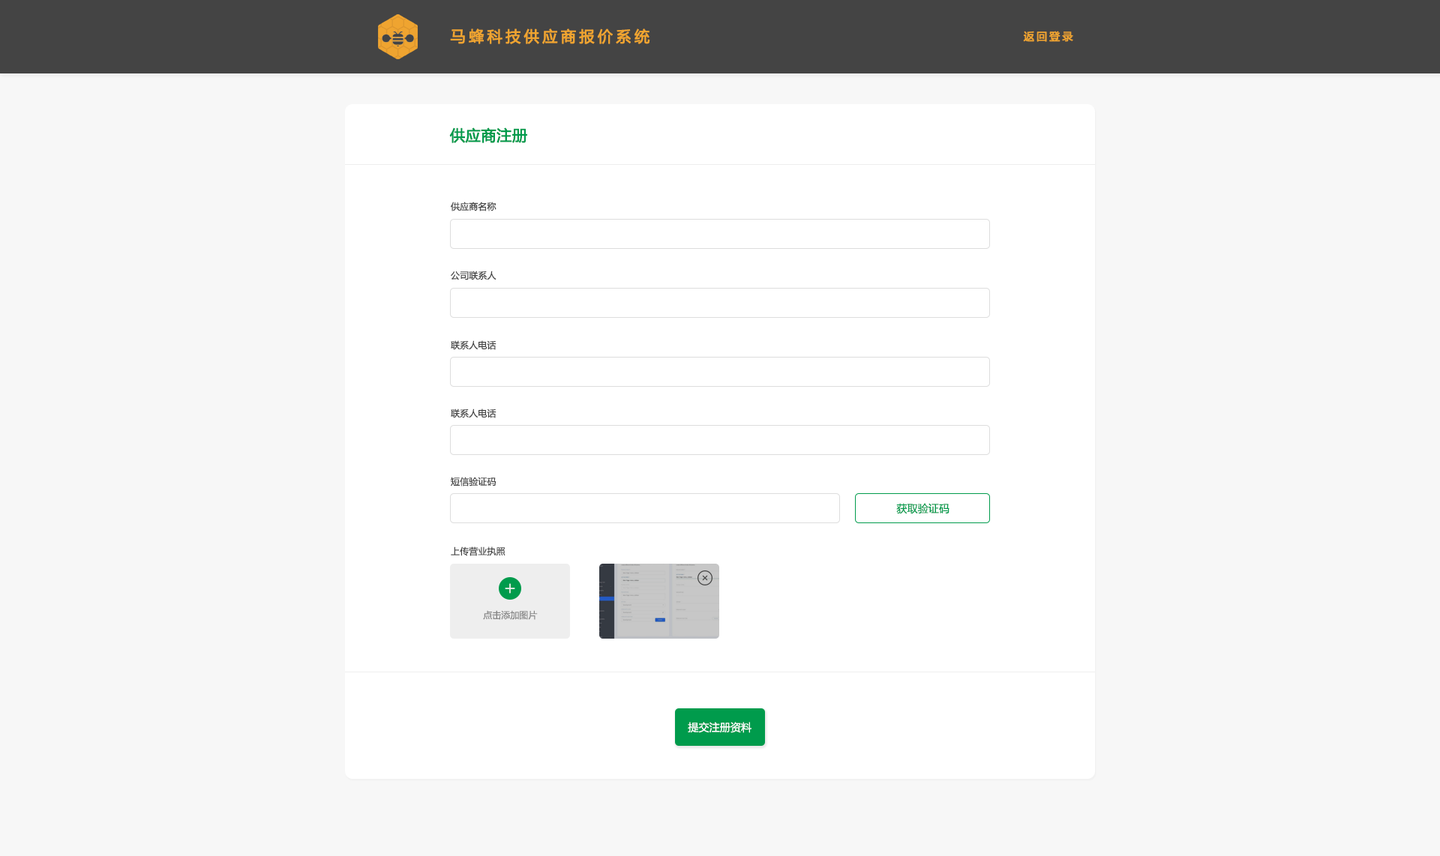
<style>
.page{position:relative;width:1440px;height:856px;background:#f7f7f7}
.page>*{position:absolute;margin:0}
.t1{font:15px "MicrosoftYaHei";letter-spacing:0.2em;color:#efa430;font-weight:bold}
.t2{font:10.5px "MicrosoftYaHei";letter-spacing:0.2em;color:#efa430;font-weight:bold}
.t3{font:15px "MicrosoftYaHei";letter-spacing:0.01em;color:#009b4c;font-weight:bold}
.t4{font:9px "MicrosoftYaHei";letter-spacing:0.01em;color:#444444}
.t5{font:10.5px "MicrosoftYaHei";letter-spacing:0.01em;color:#009b4c}
.t6{font:9px "MicrosoftYaHei";color:#888888}
.t7{font:10.5px "MicrosoftYaHei";letter-spacing:0.01em;color:#ffffff}
</style>
<div class="page">
<p class="t1" style="left:450px;top:28px;width:200px;height:16px">马蜂科技供应商报价系统</p>
<p class="t2" style="left:1023px;top:31px;width:50px;height:11px">返回登录</p>
<p class="t3" style="left:449px;top:128px;width:78px;height:15px">供应商注册</p>
<p class="t4" style="left:451px;top:202px;width:45px;height:10px">供应商名称</p>
<p class="t4" style="left:451px;top:271px;width:45px;height:9px">公司联系人</p>
<p class="t4" style="left:451px;top:340px;width:45px;height:10px">联系人电话</p>
<p class="t4" style="left:451px;top:409px;width:45px;height:9px">联系人电话</p>
<p class="t4" style="left:451px;top:477px;width:45px;height:10px">短信验证码</p>
<p class="t5" style="left:896px;top:503px;width:54px;height:11px">获取验证码</p>
<p class="t4" style="left:451px;top:547px;width:55px;height:9px">上传营业执照</p>
<p class="t6" style="left:483px;top:610px;width:55px;height:10px">点击添加图片</p>
<p class="t7" style="left:688px;top:722px;width:64px;height:12px">提交注册资料</p>
</div>
